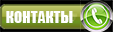
<style>
.page{position:relative;width:113px;height:32px}
.page>*{position:absolute;margin:0}
.t1{font:15.2px "Impact";color:#ffffff}
</style>
<div class="page">
<p class="t1" style="left:6px;top:11px;width:67px;height:12px">КОНТАКТЫ</p>
</div>
